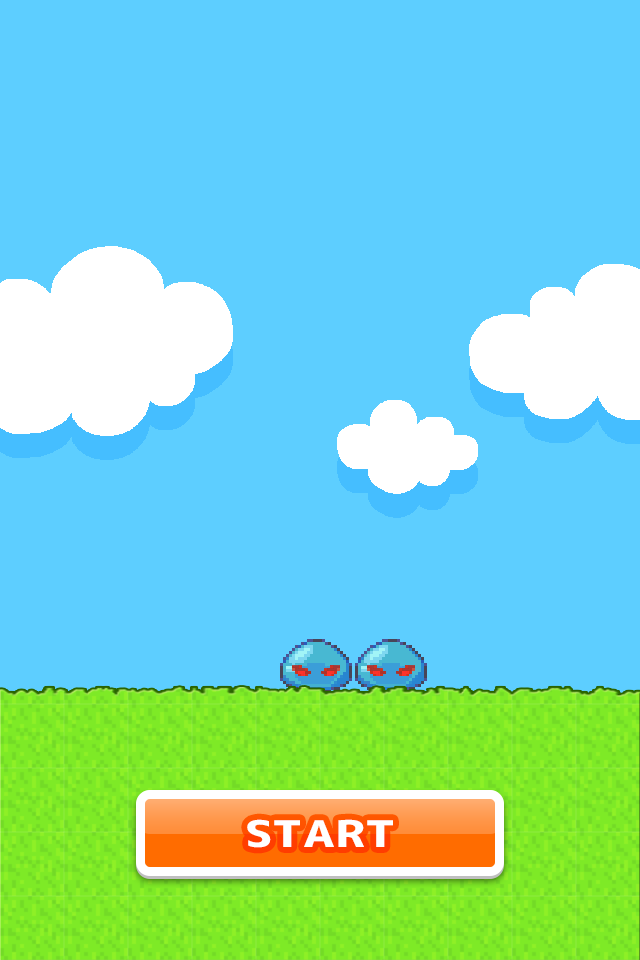
<style>
.page{position:relative;width:640px;height:960px;background:#5dceff}
.page>*{position:absolute;margin:0}
.t1{font:36.8px "mplus-1c-heavy";color:#ffffff;scale:1.25 1}
</style>
<div class="page">
<p class="t1" style="left:247px;top:819px;width:146px;height:29px">START</p>
</div>
